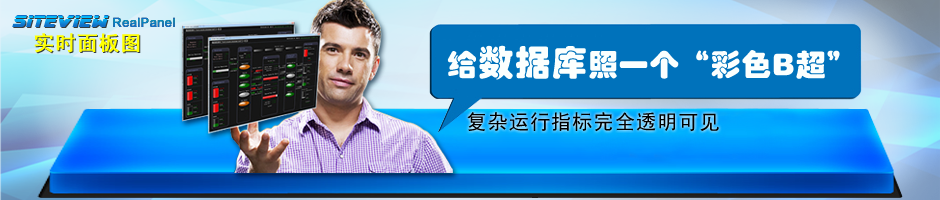
<style>
.page{position:relative;width:940px;height:200px}
.page>*{position:absolute;margin:0}
.t1{font:17.5px "242-CAI978"}
.t2{font:12.5px "ArialMT";letter-spacing:0.02em;color:#0b7cc2;font-weight:bold}
.t3{font:20.8px "SimHei";letter-spacing:0.02em;color:#ffff00;font-weight:bold}
.t4{font:30px "FZHPJW--GB1-0";letter-spacing:0.02em;color:#fbfffe}
.t5{font:36.1px "FZHPJW--GB1-0";letter-spacing:0.02em;color:#fbfffe}
.t6{font:20.8px "SimHei";letter-spacing:0.02em;color:#000000}
</style>
<div class="page">
<p class="t1" style="left:12px;top:15px;width:97px;height:12px">SITEVIEW</p>
<p class="t2" style="left:113px;top:17px;width:62px;height:10px">RealPanel</p>
<p class="t3" style="left:34px;top:33px;width:106px;height:20px">实时面板图</p>
<p class="t4" style="left:447px;top:45px;width:393px;height:35px">给<span class="t5">数据库</span>照一个“彩色B超”</p>
<p class="t6" style="left:467px;top:112px;width:252px;height:20px">复杂运行指标完全透明可见</p>
</div>
